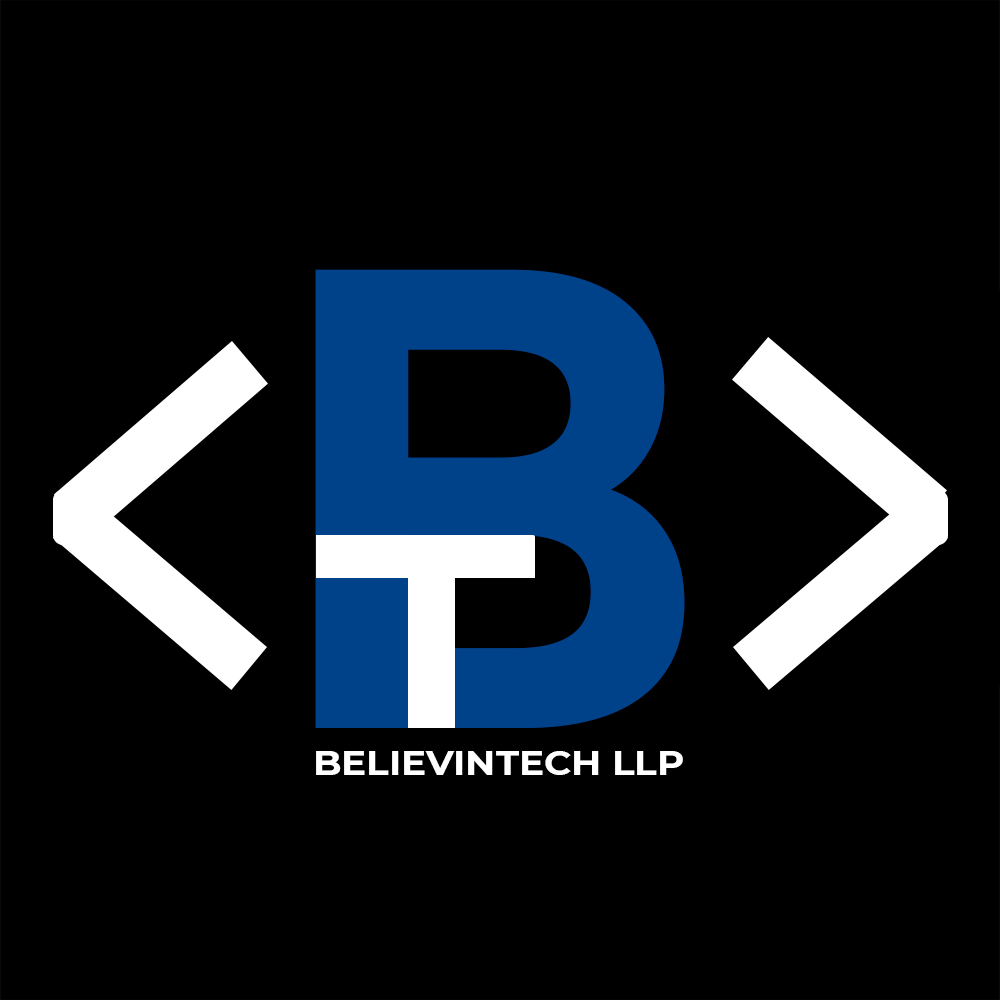
<style>
.page{position:relative;width:1000px;height:1000px;background:#000000}
.page>*{position:absolute;margin:0}
.t1{font:654.6px "Montserrat-Bold";color:#00428a;scale:0.88 1}
.t2{font:35.2px "Montserrat-Bold";color:#ffffff;scale:1.06 1}
</style>
<div class="page">
<p class="t1" style="left:315px;top:269px;width:370px;height:459px">B</p>
<p class="t2" style="left:316px;top:751px;width:367px;height:24px">BELIEVINTECH LLP</p>
</div>
